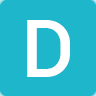
<style>
.page{position:relative;width:96px;height:96px;background:#1db6cb}
.page>*{position:absolute;margin:0}
.t1{font:80px "Roboto-Medium";color:#ffffff}
</style>
<div class="page">
<p class="t1" style="left:27px;top:20px;width:43px;height:57px">D</p>
</div>
